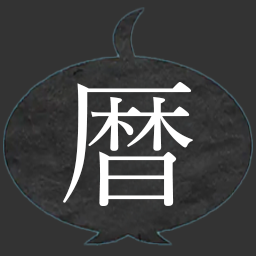
<style>
.page{position:relative;width:256px;height:256px;background:#333333}
.page>*{position:absolute;margin:0}
.t1{font:138px "YuMincho-Regular";color:#ffffff}
</style>
<div class="page">
<p class="t1" style="left:63px;top:82px;width:130px;height:124px">暦</p>
</div>
